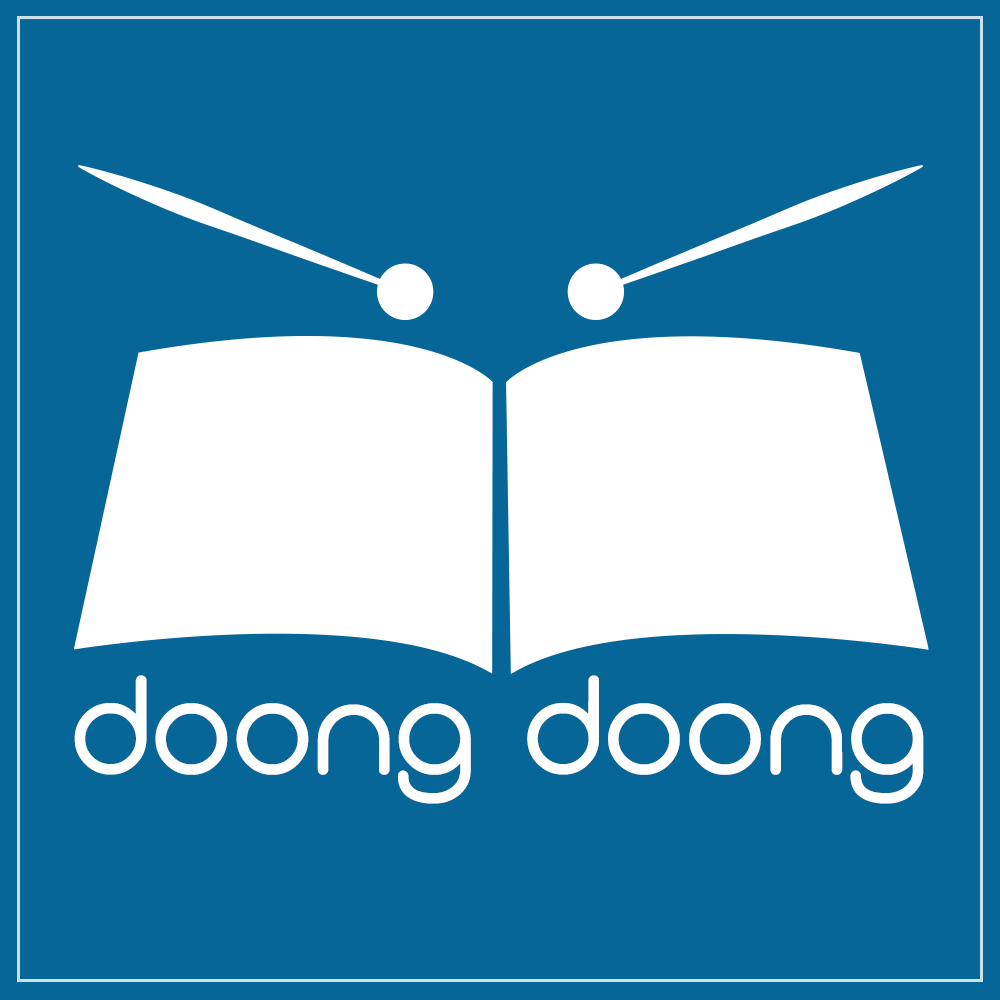
<style>
.page{position:relative;width:1000px;height:1000px;background:#066698}
.page>*{position:absolute;margin:0}
.t1{font:140px "Monoglyceride";letter-spacing:0.025em;color:#ffffff}
</style>
<div class="page">
<p class="t1" style="left:74px;top:675px;width:850px;height:129px">doong doong</p>
</div>
